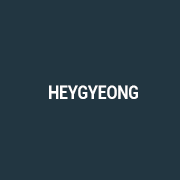
<style>
.page{position:relative;width:180px;height:180px;background:#223641}
.page>*{position:absolute;margin:0}
.t1{font:18px "Roboto-Bold";color:#fffefe;text-transform:uppercase;scale:0.87 1}
</style>
<div class="page">
<p class="t1" style="left:49px;top:85px;width:89px;height:14px">Heygyeong</p>
</div>
